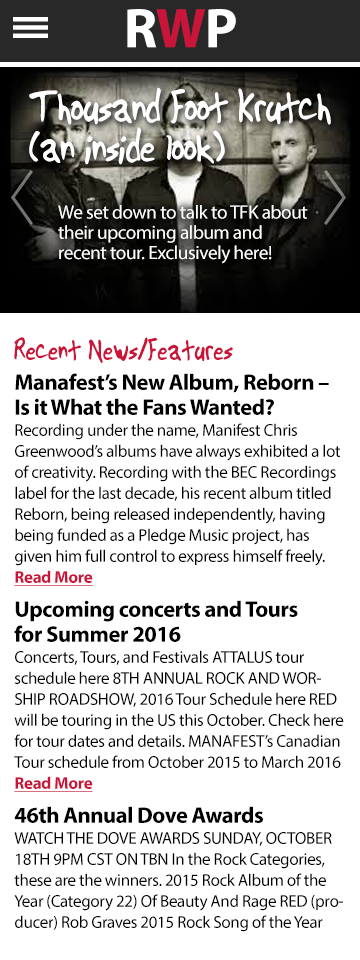
<style>
.page{position:relative;width:360px;height:960px;background:#ffffff}
.page>*{position:absolute;margin:0}
.t1{font:56.4px "MyriadPro-Bold";letter-spacing:-0.02em;color:#ffffff}
.t2{font:56.4px "MyriadPro-Bold";letter-spacing:-0.02em;color:#ca153b}
.t3{font:46px/39.7px "Another";letter-spacing:-0.02em;color:#ffffff}
.t4{font:19.2px/20.2px "MyriadPro-Regular";letter-spacing:-0.02em;color:#ffffff}
.t5{font:17px/21px "MyriadPro-Regular";letter-spacing:-0.02em;color:#000000}
.t6{font:30.6px/28px "Another";color:#ca153b}
.t7{font:22.6px/25px "MyriadPro-Bold";letter-spacing:-0.02em;color:#000000}
.t8{font:17px/21px "MyriadPro-Bold";letter-spacing:-0.02em;color:#ca153b;text-decoration:underline}
</style>
<div class="page">
<p class="t1" style="left:127px;top:9px;width:109px;height:39px">R<span class="t2">W</span>P</p>
<p class="t3" style="left:29px;top:87px;width:302px;height:78px">Thousand Foot Krutch <br>(an inside look)</p>
<p class="t4" style="left:58px;top:205px;width:250px;height:59px">We set down to talk to TFK about <br>their upcoming album and <br>recent tour. Exclusively here!</p>
<p class="t5" style="left:14px;top:337px;width:330px;height:595px"><span class="t6">Recent News/Features<br><br></span><span class="t7">Manafest’s New Album, Reborn – Is it What the Fans Wanted?<br></span>Recording under the name, Manifest Chris Greenwood’s albums have always exhibited a lot of creativity. Recording with the BEC Recordings label for the last decade, his recent album titled Reborn, being released independently, having being funded as a Pledge Music project, has given him full control to express himself freely.<br><span class="t8">Read More<br><br></span><span class="t7">Upcoming concerts and Tours  <br>for Summer 2016<br></span>Concerts, Tours, and Festivals ATTALUS tour schedule here 8TH ANNUAL ROCK AND WORSHIP ROADSHOW, 2016 Tour Schedule here RED will be touring in the US this October. Check here for tour dates and details. MANAFEST’s Canadian Tour schedule from October 2015 to March 2016 <br><span class="t8">Read More<br><br></span><span class="t7">46th Annual Dove Awards<br></span>WATCH THE DOVE AWARDS SUNDAY, OCTOBER 18TH 9PM CST ON TBN In the Rock Categories, these are the winners. 2015 Rock Album of the Year (Category 22) Of Beauty And Rage RED (producer) Rob Graves 2015 Rock Song of the Year (Category 11) “Good To Be Alive” Skillet; (writers) John L. Cooper, Zac Malov, Tom<br><span class="t8">Read More</span></p>
</div>
